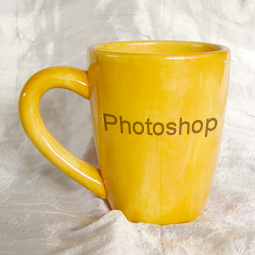
<style>
.page{position:relative;width:255px;height:255px}
.page>*{position:absolute;margin:0}
.t1{font:24px "ArialMT";color:#926512}
</style>
<div class="page">
<p class="t1" style="left:103px;top:113px;width:115px;height:24px">Photoshop</p>
</div>
